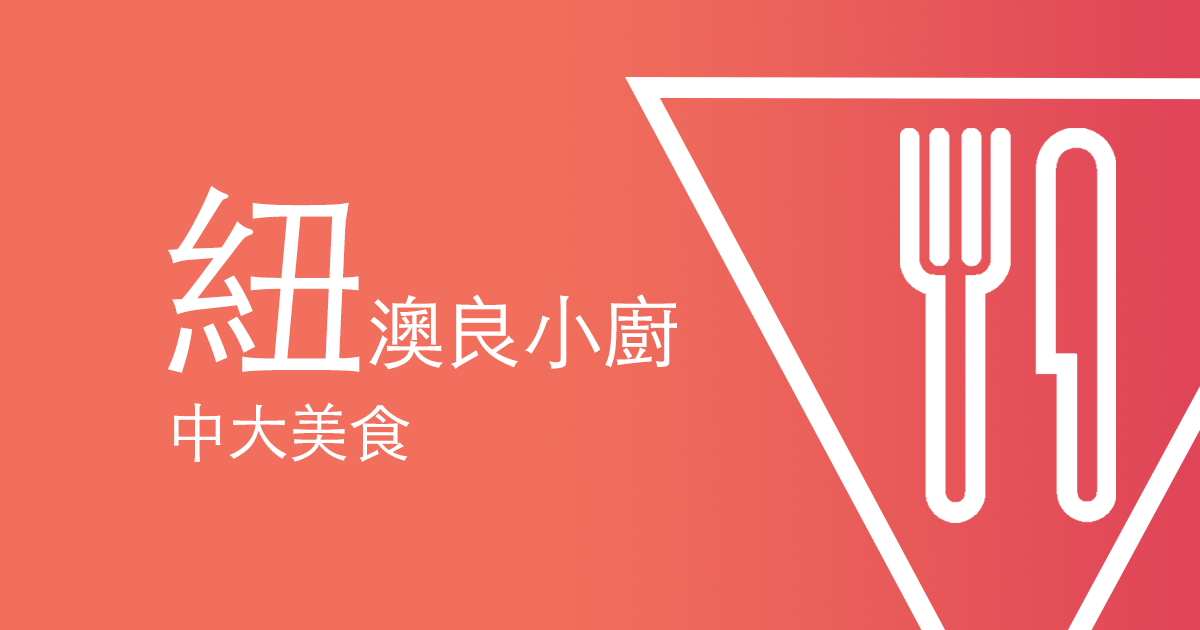
<style>
.page{position:relative;width:1200px;height:630px;background:#f16f5c}
.page>*{position:absolute;margin:0}
.t1{font:80px "STHeitiTC-Light";letter-spacing:-0.02em;color:#ffffff}
.t2{font:213.3px "STHeitiTC-Light";letter-spacing:-0.02em;color:#ffffff}
.t3{font:62.2px "STHeitiTC-Light";letter-spacing:-0.02em;color:#ffffff}
</style>
<div class="page">
<p class="t1" style="left:168px;top:186px;width:509px;height:187px"><span class="t2">紐</span>澳良小廚</p>
<p class="t3" style="left:174px;top:402px;width:236px;height:60px">中大美食</p>
</div>
